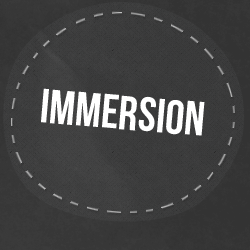
<style>
.page{position:relative;width:250px;height:250px}
.page>*{position:absolute;margin:0}
.t1{font:48px "BebasNeue";color:#ffffff}
</style>
<div class="page">
<p class="t1" style="left:41px;top:88px;width:164px;height:48px;rotate:5deg">IMMERSION</p>
</div>
